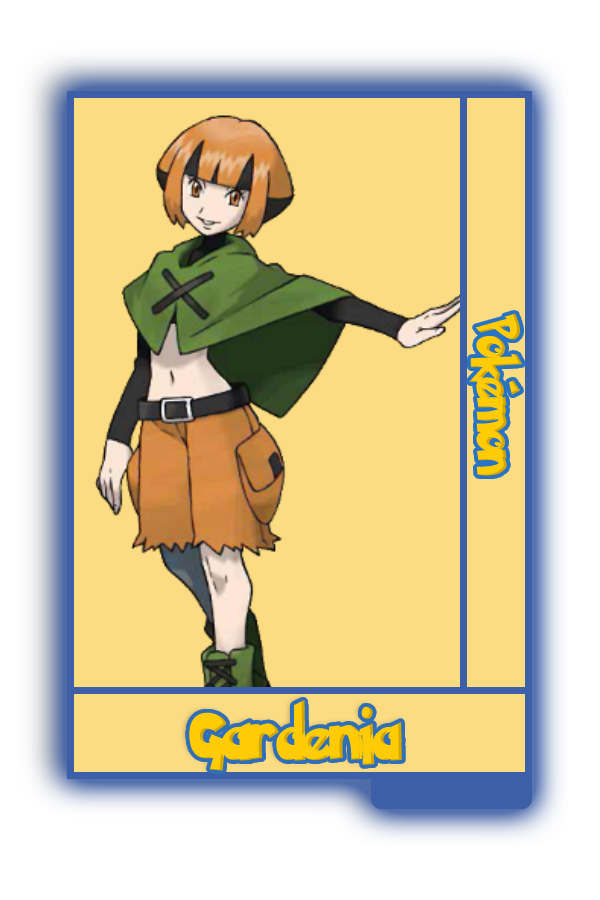
<style>
.page{position:relative;width:600px;height:900px;background:#fbdc83}
.page>*{position:absolute;margin:0}
.t1{font:48.8px "PokemonSolidNormal";color:#ffcb05;scale:0.8 1}
.t2{font:56.6px "PokemonSolidNormal";color:#ffcb05;scale:0.92 1}
</style>
<div class="page">
<p class="t1" style="left:469px;top:313px;width:54px;height:163px;rotate:90deg">Pokémon</p>
<p class="t2" style="left:189px;top:699px;width:213px;height:72px">Gardenia</p>
</div>
